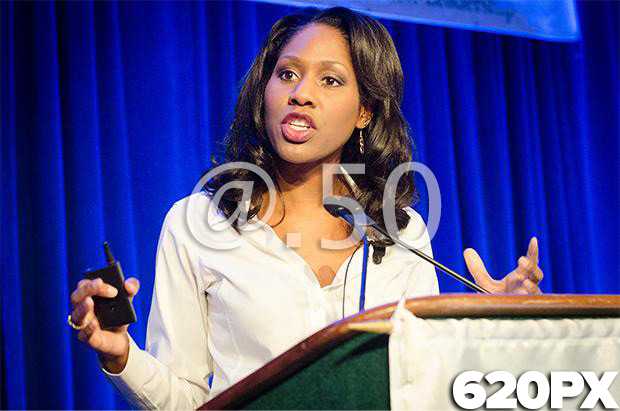
<style>
.page{position:relative;width:620px;height:411px}
.page>*{position:absolute;margin:0}
.t1{font:55px "ProximaNova-Black";letter-spacing:-0.04em;color:#ffffff;text-transform:uppercase}
</style>
<div class="page">
<p class="t1" style="left:453px;top:370px;width:167px;height:39px">620px</p>
</div>
